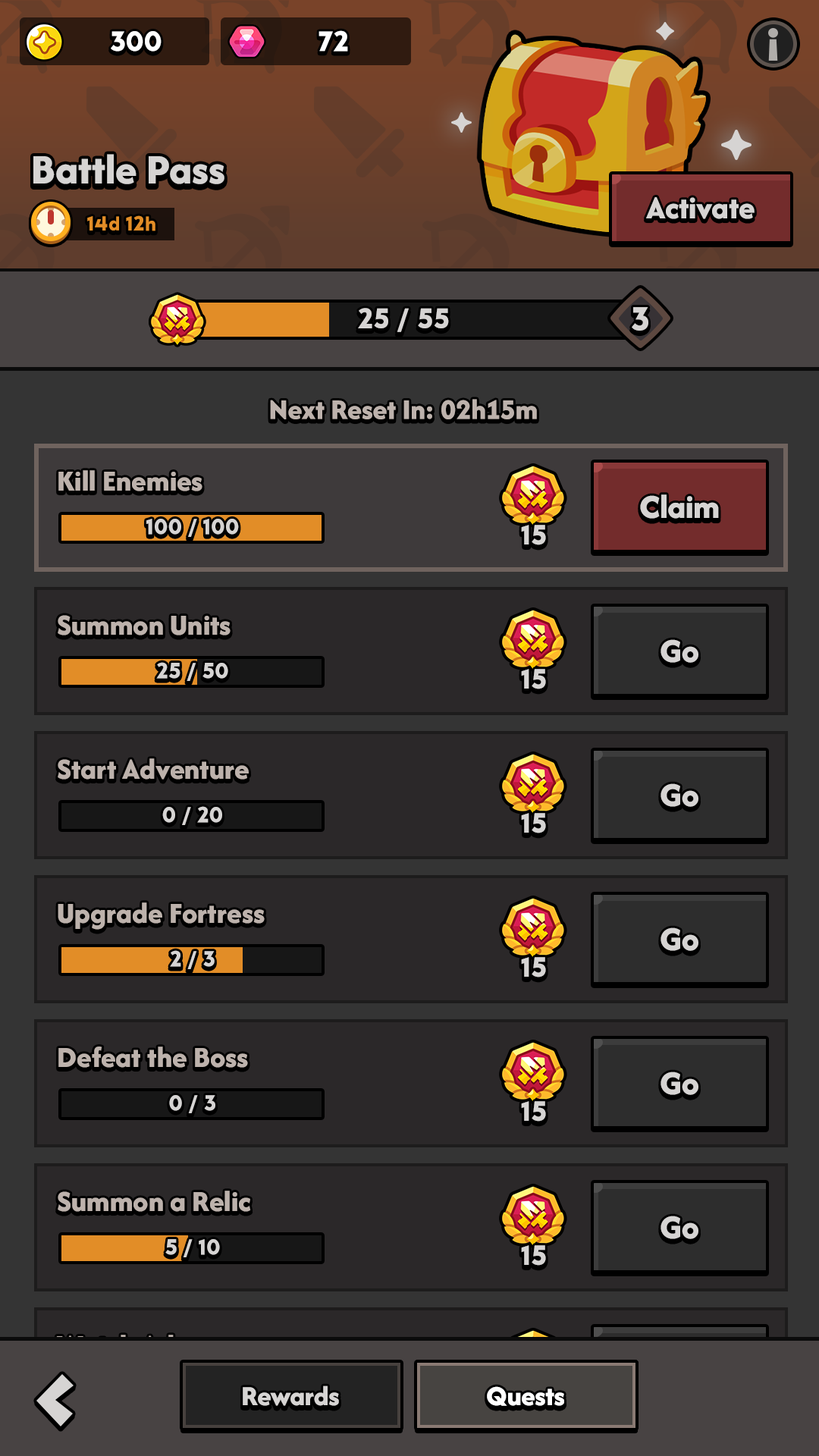
<style>
.page{position:relative;width:819px;height:1456px;background:#2b2829}
.page>*{position:absolute;margin:0}
.t1{font:29.6px "LTAvocado-Bold";color:#ffffff}
.t2{font:43.7px "AfacadFlux-ExtraBold";color:#d6d4d3}
.t3{font:33.4px "AfacadFlux-ExtraBold";color:#d6d4d3}
.t4{font:21.2px "LTAvocado-Bold";color:#e28d27}
.t5{font:29.6px "LTAvocado-Bold";color:#d6d4d3;text-transform:uppercase}
.t6{font:34.9px "LTAvocado-Bold";color:#d6d4d3;text-transform:uppercase}
.t7{font:29.6px "AfacadFlux-ExtraBold";color:#bdb2ac}
.t8{font:30.3px "AfacadFlux-ExtraBold";color:#bdb2ac}
.t9{font:34.9px "AfacadFlux-ExtraBold";color:#d6d4d3}
.t10{font:22.7px "LTAvocado-Bold";color:#d6d4d3}
.t11{font:28.8px "LTAvocado-Bold";color:#d6d4d3}
.t12{font:28.8px "AfacadFlux-ExtraBold";color:#d6d4d3}
.t13{font:28.8px "AfacadFlux-ExtraBold";color:#ffffff}
</style>
<div class="page">
<p class="t1" style="left:111px;top:31px;width:51px;height:21px">300</p>
<p class="t1" style="left:318px;top:30px;width:30px;height:22px">72</p>
<p class="t2" style="left:33px;top:154px;width:191px;height:30px">Battle Pass</p>
<p class="t3" style="left:646px;top:197px;width:109px;height:22px">Activate</p>
<p class="t4" style="left:87px;top:215px;width:68px;height:16px">14d 12h</p>
<p class="t5" style="left:358px;top:308px;width:91px;height:24px">25 / 55</p>
<p class="t6" style="left:632px;top:307px;width:16px;height:24px">3</p>
<p class="t7" style="left:270px;top:399px;width:267px;height:20px">Next Reset In: 02h15m</p>
<p class="t8" style="left:58px;top:470px;width:144px;height:21px">Kill Enemies</p>
<p class="t9" style="left:640px;top:494px;width:79px;height:25px">Claim</p>
<p class="t10" style="left:146px;top:519px;width:93px;height:18px">100 / 100</p>
<p class="t11" style="left:521px;top:525px;width:25px;height:20px">15</p>
<p class="t8" style="left:58px;top:615px;width:173px;height:20px">Summon Units</p>
<p class="t9" style="left:660px;top:639px;width:38px;height:24px">Go</p>
<p class="t10" style="left:156px;top:662px;width:72px;height:19px">25 / 50</p>
<p class="t11" style="left:521px;top:669px;width:25px;height:20px">15</p>
<p class="t8" style="left:58px;top:758px;width:191px;height:22px">Start Adventure</p>
<p class="t9" style="left:660px;top:783px;width:38px;height:24px">Go</p>
<p class="t10" style="left:162px;top:806px;width:60px;height:19px">0 / 20</p>
<p class="t11" style="left:521px;top:813px;width:25px;height:20px">15</p>
<p class="t8" style="left:58px;top:902px;width:207px;height:28px">Upgrade Fortress</p>
<p class="t9" style="left:660px;top:927px;width:38px;height:24px">Go</p>
<p class="t10" style="left:170px;top:950px;width:45px;height:19px">2 / 3</p>
<p class="t11" style="left:521px;top:957px;width:25px;height:20px">15</p>
<p class="t8" style="left:58px;top:1046px;width:190px;height:22px">Defeat the Boss</p>
<p class="t9" style="left:660px;top:1072px;width:38px;height:23px">Go</p>
<p class="t10" style="left:169px;top:1095px;width:46px;height:18px">0 / 3</p>
<p class="t11" style="left:521px;top:1101px;width:25px;height:21px">15</p>
<p class="t8" style="left:58px;top:1191px;width:193px;height:21px">Summon a Relic</p>
<p class="t9" style="left:660px;top:1216px;width:38px;height:23px">Go</p>
<p class="t10" style="left:165px;top:1239px;width:55px;height:18px">5 / 10</p>
<p class="t11" style="left:521px;top:1245px;width:25px;height:21px">15</p>
<p class="t12" style="left:243px;top:1385px;width:96px;height:21px">Rewards</p>
<p class="t13" style="left:487px;top:1386px;width:77px;height:20px">Quests</p>
<p class="t13" style="left:487px;top:1386px;width:77px;height:20px">Quests</p>
</div>
